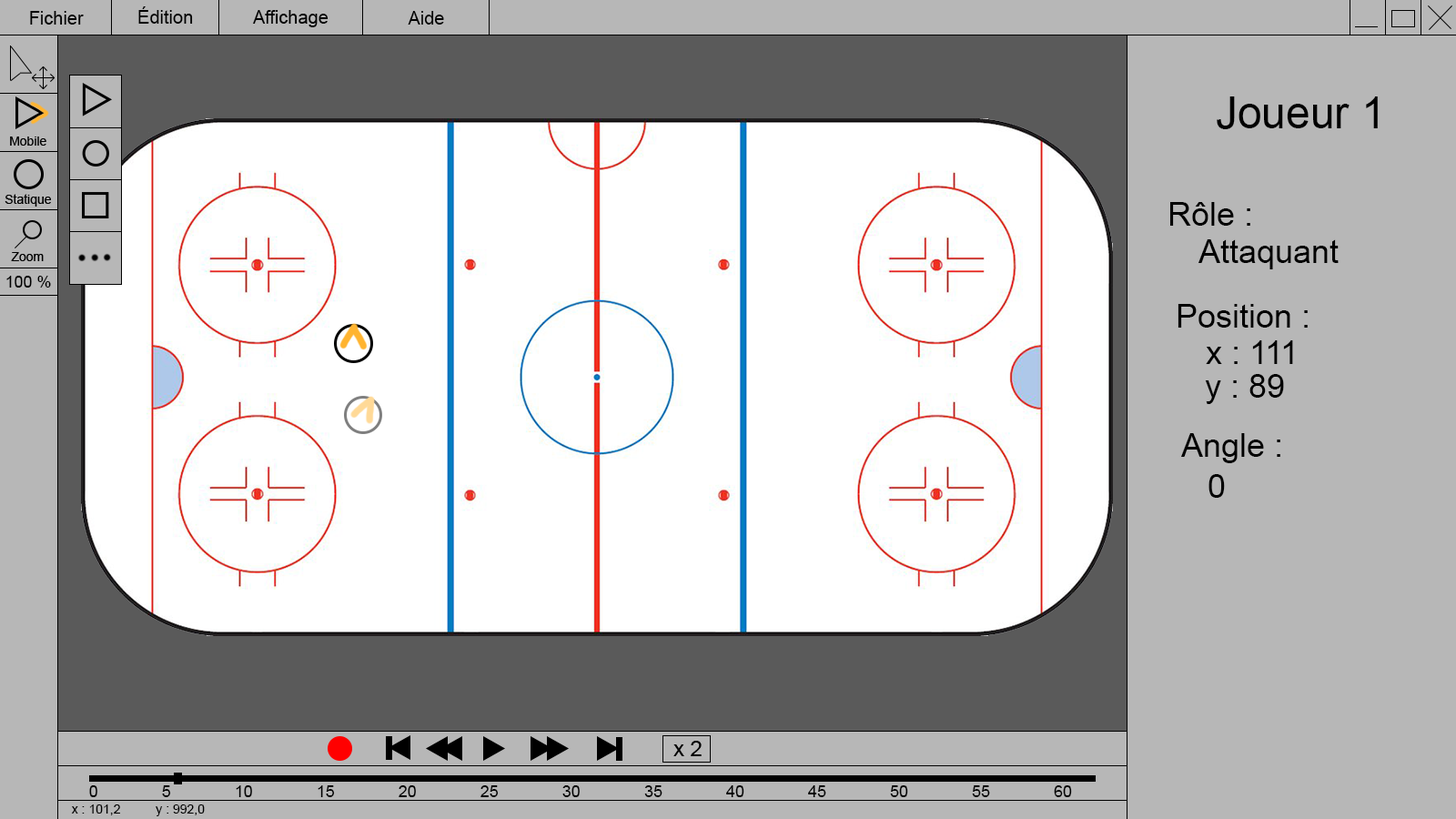
<style>
.page{position:relative;width:1456px;height:819px;background:#b7b7b7}
.page>*{position:absolute;margin:0}
.t1{font:18.2px "ArialMT";color:#000000}
.t2{font:43.7px "ArialMT";color:#000000}
.t3{font:32.8px "ArialMT";color:#000000}
.t4{font:16.4px "ArialMT";color:#000000}
.t5{font:12.7px "ArialMT";color:#000000}
</style>
<div class="page">
<p class="t1" style="left:30px;top:11px;width:54px;height:14px">Fichier</p>
<p class="t1" style="left:138px;top:6px;width:55px;height:18px">Édition</p>
<p class="t1" style="left:253px;top:10px;width:76px;height:17px">Affichage</p>
<p class="t1" style="left:408px;top:11px;width:36px;height:14px">Aide</p>
<p class="t2" style="left:1217px;top:96px;width:161px;height:33px">Joueur 1</p>
<p class="t3" style="left:1170px;top:202px;width:80px;height:24px">Rôle :</p>
<p class="t3" style="left:1198px;top:239px;width:141px;height:30px">Attaquant</p>
<p class="t4" style="left:6px;top:276px;width:45px;height:12px">100 %</p>
<p class="t3" style="left:1178px;top:304px;width:130px;height:24px">Position :</p>
<p class="t3" style="left:1206px;top:340px;width:87px;height:24px">x : 111</p>
<p class="t3" style="left:1205px;top:374px;width:79px;height:30px">y : 89</p>
<p class="t3" style="left:1181px;top:433px;width:99px;height:30px">Angle :</p>
<p class="t3" style="left:1208px;top:474px;width:17px;height:24px">0</p>
<p class="t4" style="left:89px;top:785px;width:983px;height:12px">0              5              10              15              20              25              30              35              40              45              50              55              60</p>
<p class="t5" style="left:71px;top:804px;width:134px;height:12px">x : 101,2          y : 992,0</p>
</div>
